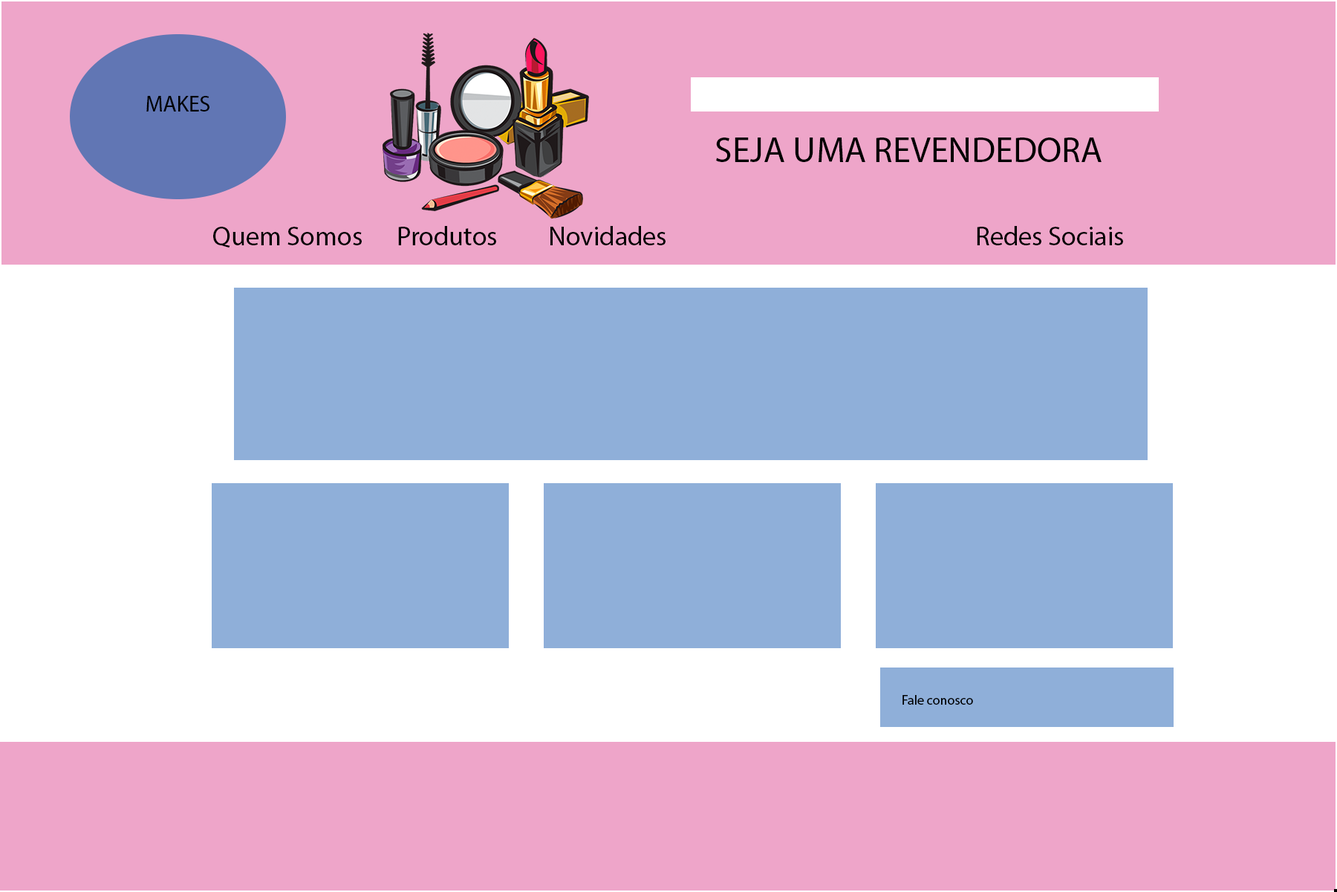
<style>
.page{position:relative;width:1337px;height:892px;background:#eea5c9}
.page>*{position:absolute;margin:0}
.t1{font:22.3px "MyriadPro-Regular";color:#000000}
.t2{font:35.7px "MyriadPro-Regular";color:#000000}
.t3{font:26.7px "MyriadPro-Regular";color:#000000}
.t4{font:13.4px "MyriadPro-Regular";color:#000000}
</style>
<div class="page">
<p class="t1" style="left:146px;top:96px;width:64px;height:15px">MAKES</p>
<p class="t2" style="left:716px;top:137px;width:386px;height:25px">SEJA UMA REVENDEDORA</p>
<p class="t3" style="left:213px;top:226px;width:910px;height:22px">Quem Somos      Produtos         Novidades                                                Redes Sociais</p>
<p class="t4" style="left:903px;top:695px;width:70px;height:9px">Fale conosco</p>
</div>
